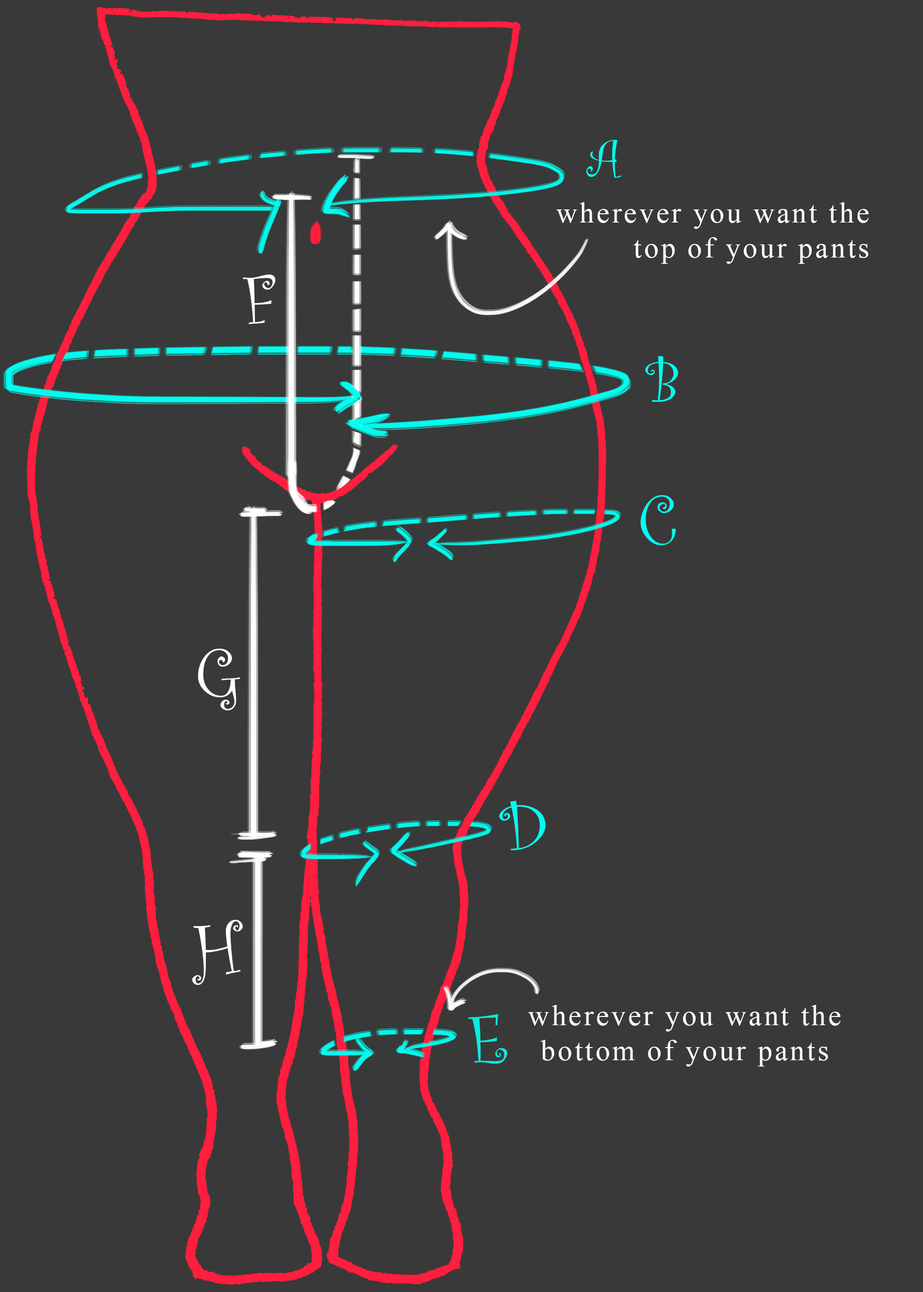
<style>
.page{position:relative;width:923px;height:1292px;background:#393939}
.page>*{position:absolute;margin:0}
.t1{font:54.4px "CurlzMT";letter-spacing:0.08em;color:#00fff0}
.t2{font:29.1px "TimesNewRomanPSMT";letter-spacing:0.08em;color:#ffffff}
.t3{font:72.9px "CurlzMT";letter-spacing:0.08em;color:#ffffff}
.t4{font:62.7px "CurlzMT";letter-spacing:0.08em;color:#00fff0}
.t5{font:72.9px "CurlzMT";letter-spacing:0.08em;color:#00fff0}
.t6{font:72.9px "CurlzMT";letter-spacing:0.08em;color:#05eee1}
</style>
<div class="page">
<p class="t1" style="left:586px;top:140px;width:35px;height:38px">A</p>
<p class="t2" style="left:556px;top:202px;width:313px;height:62px;text-align:right">wherever you want the top of your pants</p>
<p class="t3" style="left:243px;top:274px;width:32px;height:50px">F</p>
<p class="t4" style="left:645px;top:356px;width:33px;height:46px">B</p>
<p class="t5" style="left:640px;top:495px;width:36px;height:50px">C</p>
<p class="t3" style="left:198px;top:649px;width:42px;height:61px">G</p>
<p class="t5" style="left:499px;top:801px;width:47px;height:49px">D</p>
<p class="t3" style="left:192px;top:920px;width:51px;height:65px">H</p>
<p class="t6" style="left:468px;top:1014px;width:39px;height:49px">E</p>
<p class="t2" style="left:528px;top:1005px;width:312px;height:61px;text-align:center">wherever you want the bottom of your pants</p>
</div>
